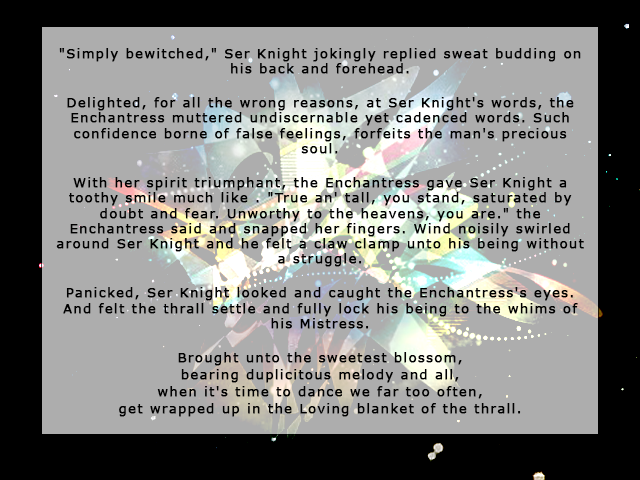
<style>
.page{position:relative;width:640px;height:480px;background:#adadad}
.page>*{position:absolute;margin:0}
.t1{font:12.7px "Verdana";letter-spacing:0.1em;color:#000000;font-weight:bold}
</style>
<div class="page">
<p class="t1" style="left:56px;top:48px;width:528px;height:369px;text-align:center">"Simply bewitched," Ser Knight jokingly replied sweat budding on his back and forehead.<br><br>Delighted, for all the wrong reasons, at Ser Knight's words, the Enchantress muttered undiscernable yet cadenced words. Such confidence borne of false feelings, forfeits the man's precious soul. <br><br>With her spirit triumphant, the Enchantress gave Ser Knight a toothy smile much like . "True an' tall, you stand, saturated by doubt and fear. Unworthy to the heavens, you are." the Enchantress said and snapped her fingers. Wind noisily swirled around Ser Knight and he felt a claw clamp unto his being without a struggle.<br><br>Panicked, Ser Knight looked and caught the Enchantress's eyes. And felt the thrall settle and fully lock his being to the whims of his Mistress.<br><br>Brought unto the sweetest blossom,<br>bearing duplicitous melody and all,<br>when it's time to dance we far too often,<br>get wrapped up in the Loving blanket of the thrall.</p>
</div>
